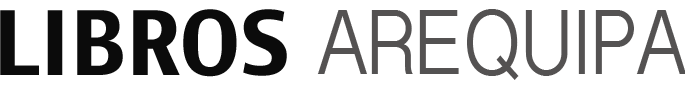
<style>
.page{position:relative;width:685px;height:85px;background:#ffffff}
.page>*{position:absolute;margin:0}
.t1{font:86.4px "CharcoalCY";color:#0b0b0b}
.t2{font:81.2px "BanglaSangamMN";color:#545252;scale:0.87 1}
</style>
<div class="page">
<p class="t1" style="left:0px;top:9px;width:287px;height:68px">LIBROS</p>
<p class="t2" style="left:317px;top:9px;width:369px;height:71px">AREQUIPA</p>
</div>
